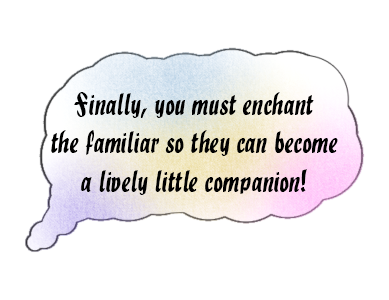
<style>
.page{position:relative;width:389px;height:300px;background:#ffffff}
.page>*{position:absolute;margin:0}
.t1{font:32px "Holla";color:#000000}
</style>
<div class="page">
<p class="t1" style="left:51px;top:92px;width:287px;height:103px;text-align:center">Finally, you must enchant<br>the familiar so they can become<br>a lively little companion!</p>
</div>
